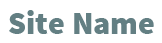
<style>
.page{position:relative;width:162px;height:43px;background:#ffffff}
.page>*{position:absolute;margin:0}
.t1{font:32px "SourceSansPro-Black";color:#637f83}
</style>
<div class="page">
<p class="t1" style="left:9px;top:10px;width:145px;height:24px">Site Name</p>
</div>
